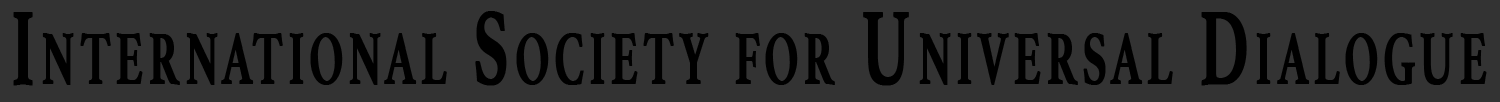
<style>
.page{position:relative;width:1500px;height:102px;background:#333333}
.page>*{position:absolute;margin:0}
.t1{font:108.6px "Athelas-Bold";letter-spacing:0.1em;color:#000000;font-variant:small-caps;font-weight:bold;scale:0.59 1}
</style>
<div class="page">
<p class="t1" style="left:13px;top:11px;width:1474px;height:75px">International Society for Universal Dialogue</p>
</div>
